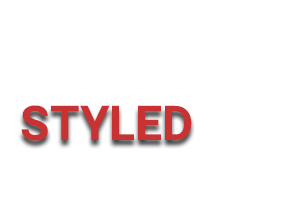
<style>
.page{position:relative;width:300px;height:200px;background:#ffffff}
.page>*{position:absolute;margin:0}
.t1{font:48px "Roboto-Bold";color:#c83232}
</style>
<div class="page">
<p class="t1" style="left:21px;top:105px;width:171px;height:36px">STYLED</p>
</div>
